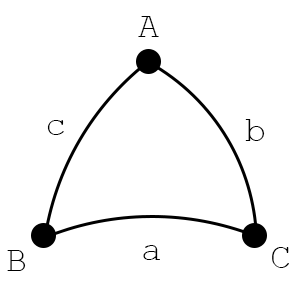
<style>
.page{position:relative;width:300px;height:299px;background:#ffffff}
.page>*{position:absolute;margin:0}
.t1{font:35px "CourierNewPSMT";letter-spacing:0.1em;color:#000000}
</style>
<div class="page">
<p class="t1" style="left:138px;top:16px;width:21px;height:21px">A</p>
<p class="t1" style="left:47px;top:120px;width:17px;height:15px">c</p>
<p class="t1" style="left:245px;top:119px;width:20px;height:22px">b</p>
<p class="t1" style="left:143px;top:245px;width:17px;height:15px">a</p>
<p class="t1" style="left:7px;top:250px;width:19px;height:21px">B</p>
<p class="t1" style="left:272px;top:247px;width:17px;height:21px">C</p>
</div>
